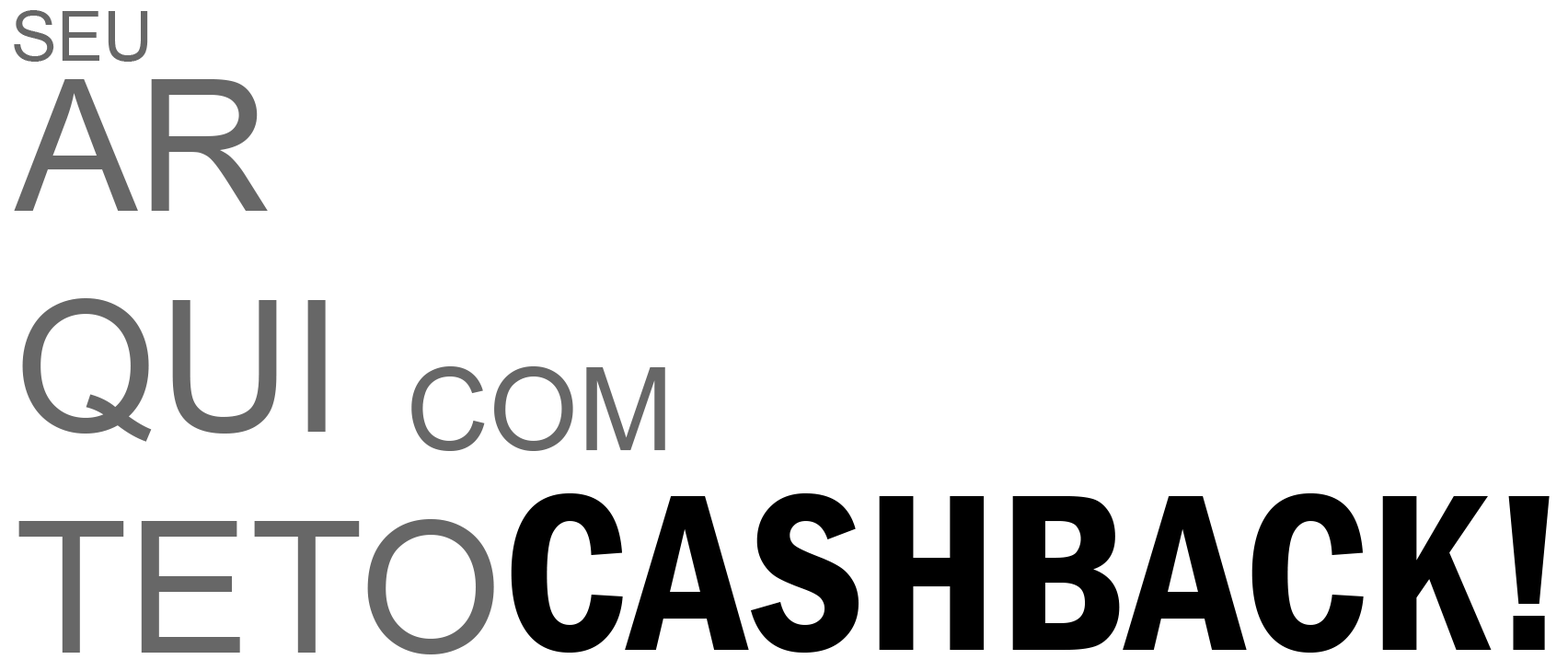
<style>
.page{position:relative;width:1568px;height:671px;background:#ffffff}
.page>*{position:absolute;margin:0}
.t1{font:69px "ArialMT";color:#676767}
.t2{font:184px "ArialMT";color:#676767}
.t3{font:115px "ArialMT";color:#676767}
.t4{font:230px "FranklinGothic-DemiCond";color:#000000}
</style>
<div class="page">
<p class="t1" style="left:14px;top:10px;width:134px;height:52px">SEU</p>
<p class="t2" style="left:14px;top:79px;width:480px;height:575px">AR<br>QUI<br>TETO</p>
<p class="t3" style="left:411px;top:366px;width:254px;height:85px">COM</p>
<p class="t4" style="left:511px;top:493px;width:1039px;height:159px">CASHBACK!</p>
</div>
